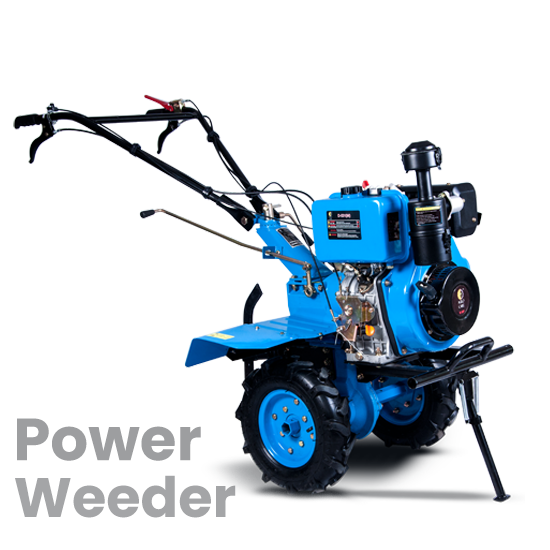
<style>
.page{position:relative;width:550px;height:550px;background:#ffffff}
.page>*{position:absolute;margin:0}
.t1{font:59.5px "Poppins-Bold";color:#9d9ea0}
.t2{font:55.6px "Poppins-Bold";color:#a4a6a7}
</style>
<div class="page">
<p class="t1" style="left:17px;top:418px;width:184px;height:43px">Power</p>
<p class="t2" style="left:15px;top:475px;width:221px;height:43px">Weeder</p>
</div>
